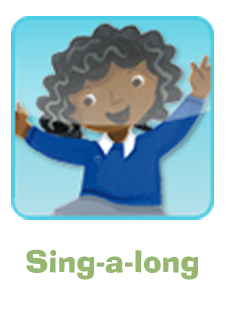
<style>
.page{position:relative;width:226px;height:320px;background:#ffffff}
.page>*{position:absolute;margin:0}
.t1{font:29.6px "AdLibBT-Regular";color:#96b76f}
</style>
<div class="page">
<p class="t1" style="left:26px;top:249px;width:172px;height:31px">Sing-a-long</p>
</div>
